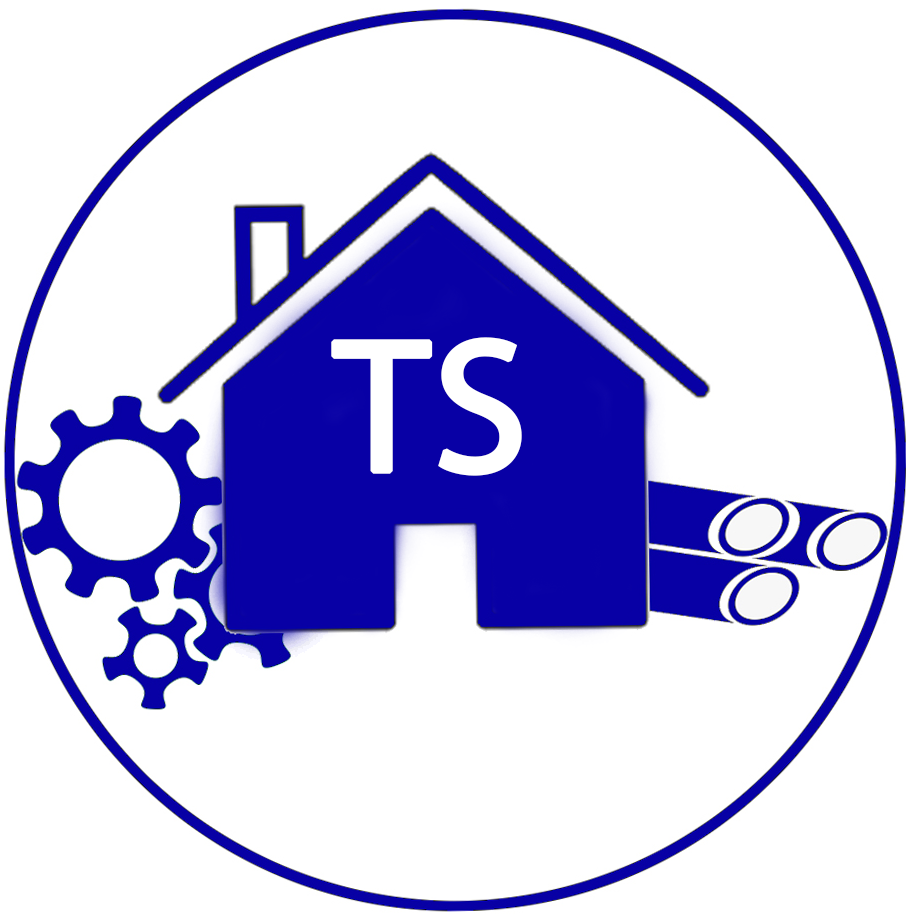
<style>
.page{position:relative;width:906px;height:923px;background:#ffffff}
.page>*{position:absolute;margin:0}
.t1{font:191.7px "MyriadPro-Regular";color:#ffffff;font-weight:bold}
</style>
<div class="page">
<p class="t1" style="left:331px;top:337px;width:191px;height:139px">TS</p>
</div>
